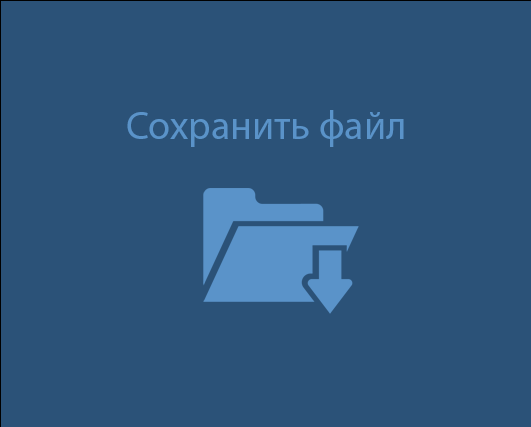
<style>
.page{position:relative;width:531px;height:427px;background:#2b5278}
.page>*{position:absolute;margin:0}
.t1{font:40px "MyriadPro-Regular";color:#5a93c9}
</style>
<div class="page">
<p class="t1" style="left:127px;top:110px;width:277px;height:37px">Сохранить файл</p>
</div>
